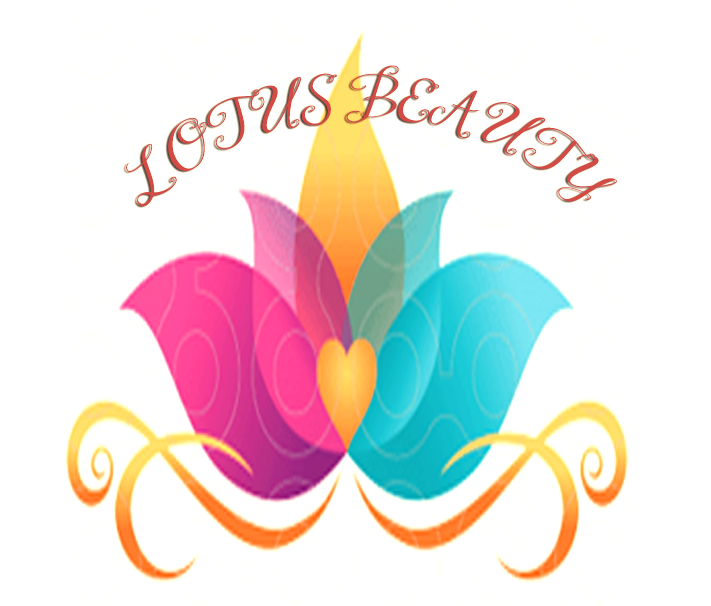
<style>
.page{position:relative;width:711px;height:606px;background:#ffffff}
.page>*{position:absolute;margin:0}
.t1{font:48px "JandaStylishMonogram";letter-spacing:-0.005em;color:#d44b45;font-style:italic}
</style>
<div class="page">
<p class="t1" style="left:126px;top:65px;width:491px;height:142px;text-align:center">LOTUS BEAUTY</p>
</div>
